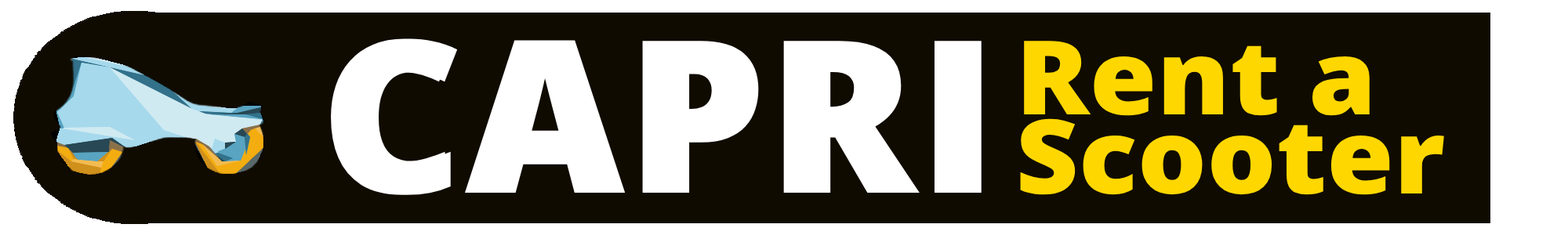
<style>
.page{position:relative;width:1568px;height:235px;background:#100b00}
.page>*{position:absolute;margin:0}
.t1{font:212.8px "OpenSans-ExtraBold";color:#ffffff;font-weight:bold}
.t2{font:103px/78.9px "OpenSans-ExtraBold";color:#ffd700;scale:1.06 1}
</style>
<div class="page">
<p class="t1" style="left:331px;top:38px;width:651px;height:157px">CAPRI</p>
<p class="t2" style="left:1020px;top:41px;width:424px;height:154px">Rent a<br>Scooter</p>
</div>
